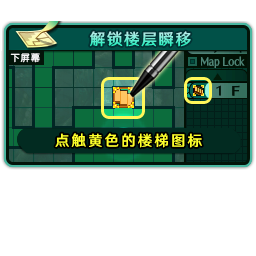
<style>
.page{position:relative;width:256px;height:256px;background:#ffffff}
.page>*{position:absolute;margin:0}
.t1{font:16px "HYWenHei-FEW";letter-spacing:0.105em;scale:0.97 1}
.t2{font:9.3px "FZY3--GB1-4";letter-spacing:0.105em;color:#ffffff;scale:0.97 1}
.t3{font:14.7px "HYWenHei-FEW";letter-spacing:0.165em;color:#fdff2c;scale:0.97 1}
</style>
<div class="page">
<p class="t1" style="left:90px;top:31px;width:101px;height:16px">解锁楼层瞬移</p>
<p class="t2" style="left:10px;top:53px;width:30px;height:10px">下屏幕</p>
<p class="t3" style="left:55px;top:133px;width:147px;height:15px">点触黄色的楼梯图标</p>
</div>
